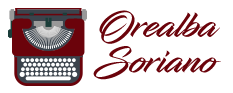
<style>
.page{position:relative;width:233px;height:93px;background:#ffffff}
.page>*{position:absolute;margin:0}
.t1{font:36px/35.5px "InfiniteStroke-Bolder";color:#6b030b}
</style>
<div class="page">
<p class="t1" style="left:93px;top:10px;width:128px;height:70px;text-align:center">Orealba<br>Soriano</p>
</div>
